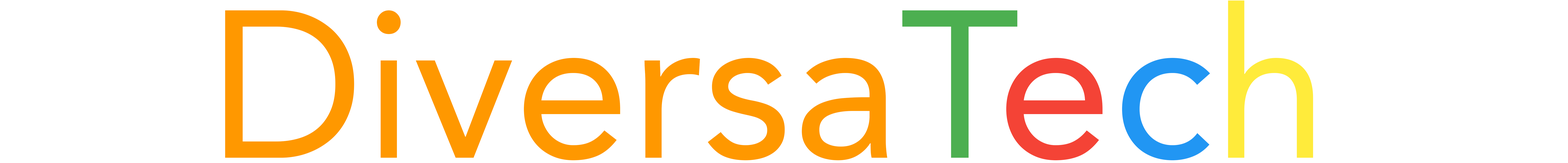
<style>
.page{position:relative;width:1568px;height:163px;background:#ffffff}
.page>*{position:absolute;margin:0}
.t1{font:208.2px "Avenir-Roman";color:#ff9800}
.t2{font:208.2px "Avenir-Roman";color:#4caf50}
.t3{font:208.2px "Avenir-Roman";color:#f44336}
.t4{font:208.2px "Avenir-Roman";color:#2196f3}
.t5{font:208.2px "Avenir-Roman";color:#ffeb3b}
</style>
<div class="page">
<p class="t1" style="left:225px;top:0px;width:1088px;height:161px">Diversa<span class="t2">T</span><span class="t3">e</span><span class="t4">c</span><span class="t5">h</span></p>
</div>
